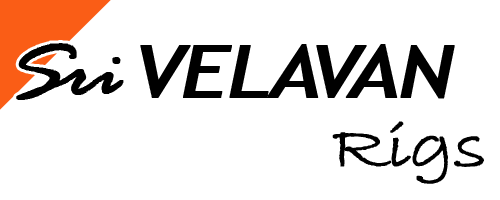
<style>
.page{position:relative;width:500px;height:200px;background:#ffffff}
.page>*{position:absolute;margin:0}
.t1{font:77.8px "RageItalic";letter-spacing:-0.03em;color:#000000;font-weight:bold;scale:1.14 1}
.t2{font:73.1px "TrebuchetMS-Italic";letter-spacing:-0.03em;color:#000000;font-weight:bold;scale:1.14 1}
.t3{font:65.8px "BradleyHandITC";letter-spacing:-0.03em;color:#000000;font-weight:bold;scale:1.14 1}
</style>
<div class="page">
<p class="t1" style="left:16px;top:43px;width:108px;height:57px">Sri</p>
<p class="t2" style="left:140px;top:44px;width:315px;height:55px">VELAVAN</p>
<p class="t3" style="left:332px;top:121px;width:152px;height:63px">Rigs</p>
</div>
